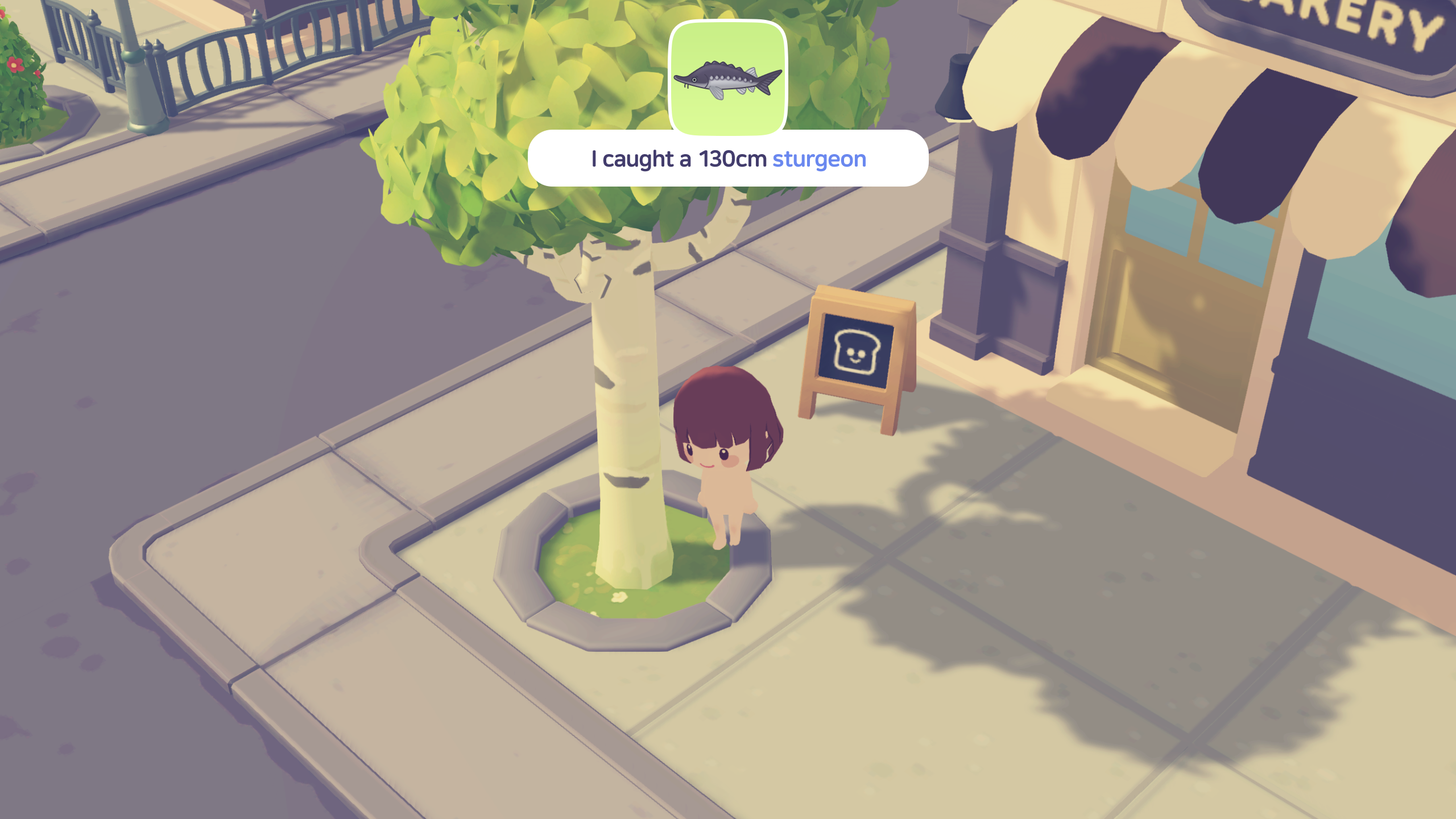
<style>
.page{position:relative;width:1456px;height:819px}
.page>*{position:absolute;margin:0}
.t1{font:22.7px "NanumSquareRoundEB";letter-spacing:-0.02em;color:#423c6c}
.t2{font:22.7px "NanumSquareRoundEB";letter-spacing:-0.02em;color:#6a88ef}
</style>
<div class="page">
<p class="t1" style="left:593px;top:150px;width:273px;height:22px">I caught a 130cm <span class="t2">sturgeon</span></p>
</div>
